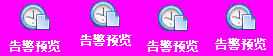
<style>
.page{position:relative;width:273px;height:56px;background:#ff00ff}
.page>*{position:absolute;margin:0}
.t1{font:12px "SimSun";color:#ffffff;font-weight:bold}
</style>
<div class="page">
<p class="t1" style="left:9px;top:40px;width:51px;height:12px">告警预览</p>
<p class="t1" style="left:80px;top:34px;width:51px;height:12px">告警预览</p>
<p class="t1" style="left:147px;top:40px;width:51px;height:12px">告警预览</p>
<p class="t1" style="left:215px;top:38px;width:51px;height:12px">告警预览</p>
</div>
